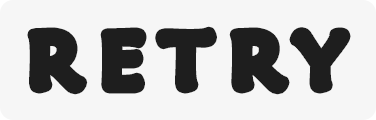
<style>
.page{position:relative;width:376px;height:120px;background:#f6f6f6}
.page>*{position:absolute;margin:0}
.t1{font:75px "MaiandraGD-Regular";letter-spacing:0.2em;color:#1e1e1e;font-weight:bold;scale:1.11 1}
</style>
<div class="page">
<p class="t1" style="left:33px;top:32px;width:312px;height:57px">RETRY</p>
</div>
